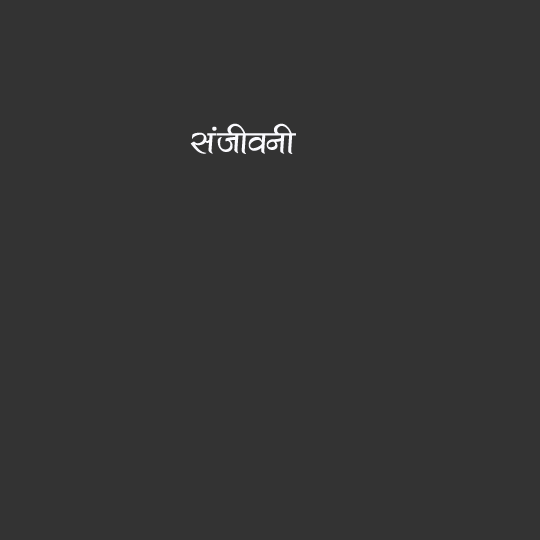
<style>
.page{position:relative;width:540px;height:540px;background:#333333}
.page>*{position:absolute;margin:0}
.t1{font:40px "CVShrinagar";color:#fafafe;font-weight:bold}
</style>
<div class="page">
<p class="t1" style="left:190px;top:123px;width:106px;height:31px">;+hLjgL</p>
</div>
